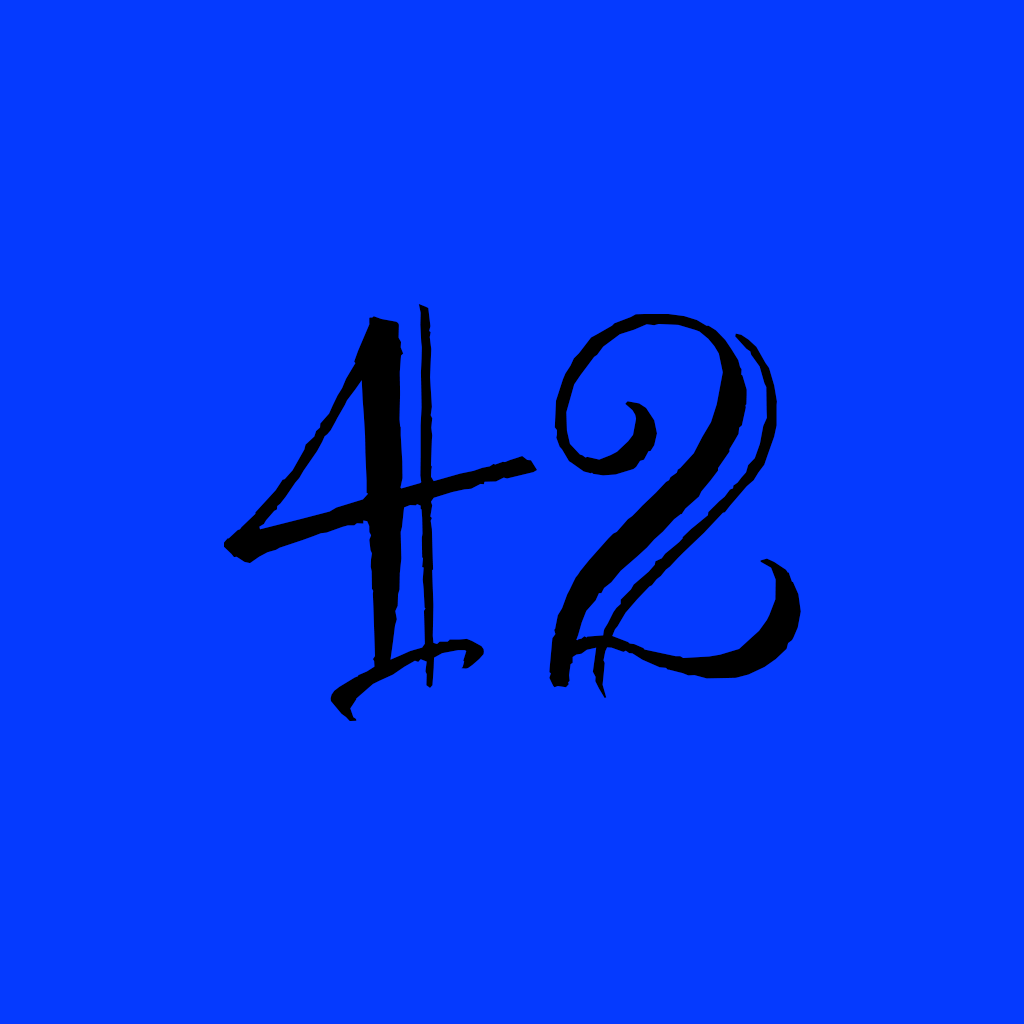
<style>
.page{position:relative;width:1024px;height:1024px;background:#053aff}
.page>*{position:absolute;margin:0}
.t1{font:618.8px "PartyLetPlain";color:#000000}
</style>
<div class="page">
<p class="t1" style="left:224px;top:304px;width:577px;height:417px">42</p>
</div>
